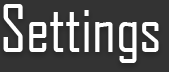
<style>
.page{position:relative;width:169px;height:72px;background:#333333}
.page>*{position:absolute;margin:0}
.t1{font:62.5px "AgencyFB-Reg";color:#ffffff}
</style>
<div class="page">
<p class="t1" style="left:3px;top:4px;width:156px;height:59px">Settings</p>
</div>
